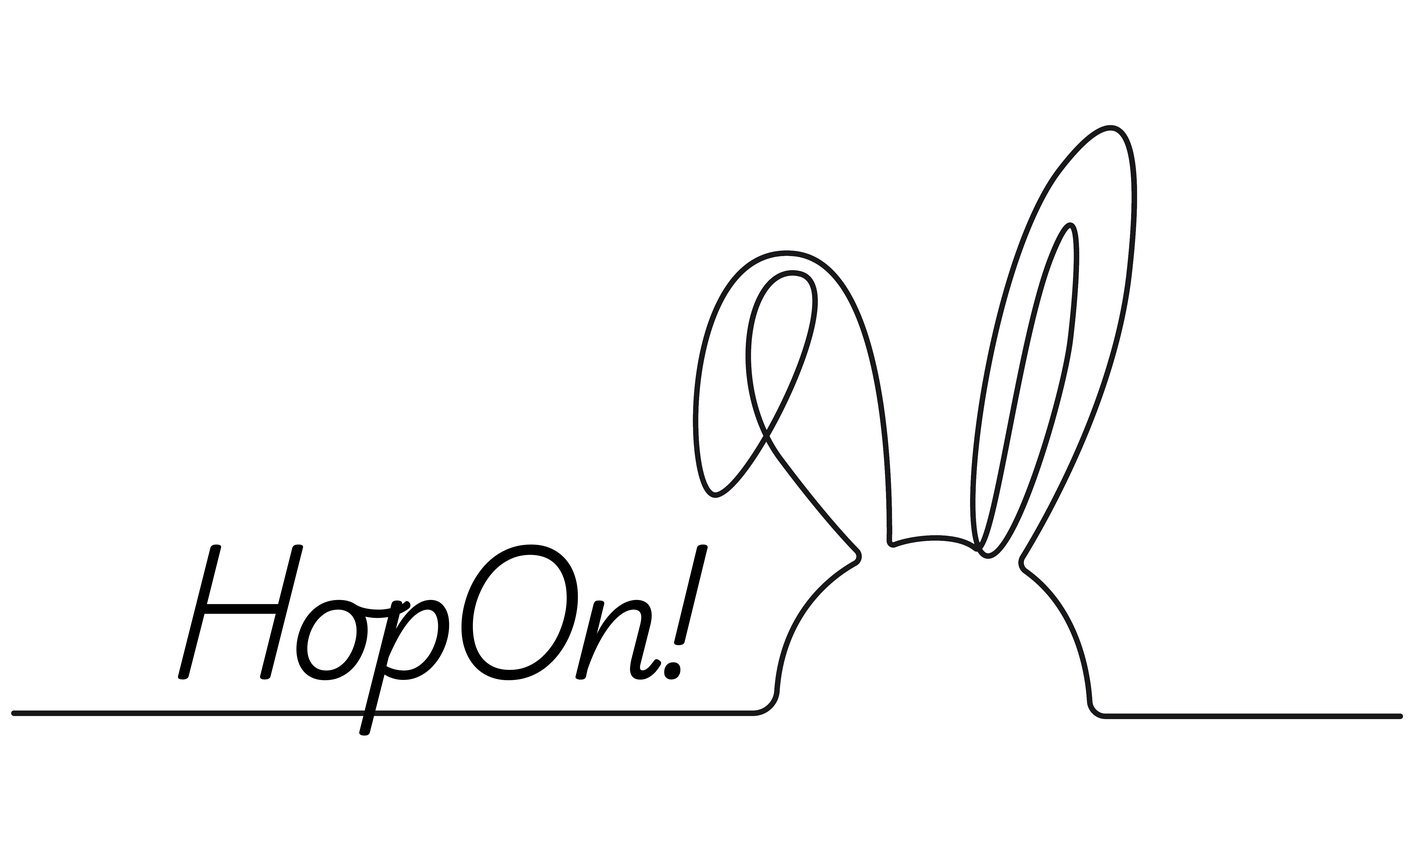
<style>
.page{position:relative;width:1410px;height:846px;background:#ffffff}
.page>*{position:absolute;margin:0}
.t1{font:149.2px "PlaywriteIS-Light";letter-spacing:-0.08em;color:#000000}
</style>
<div class="page">
<p class="t1" style="left:178px;top:544px;width:530px;height:192px">HopOn!</p>
</div>
